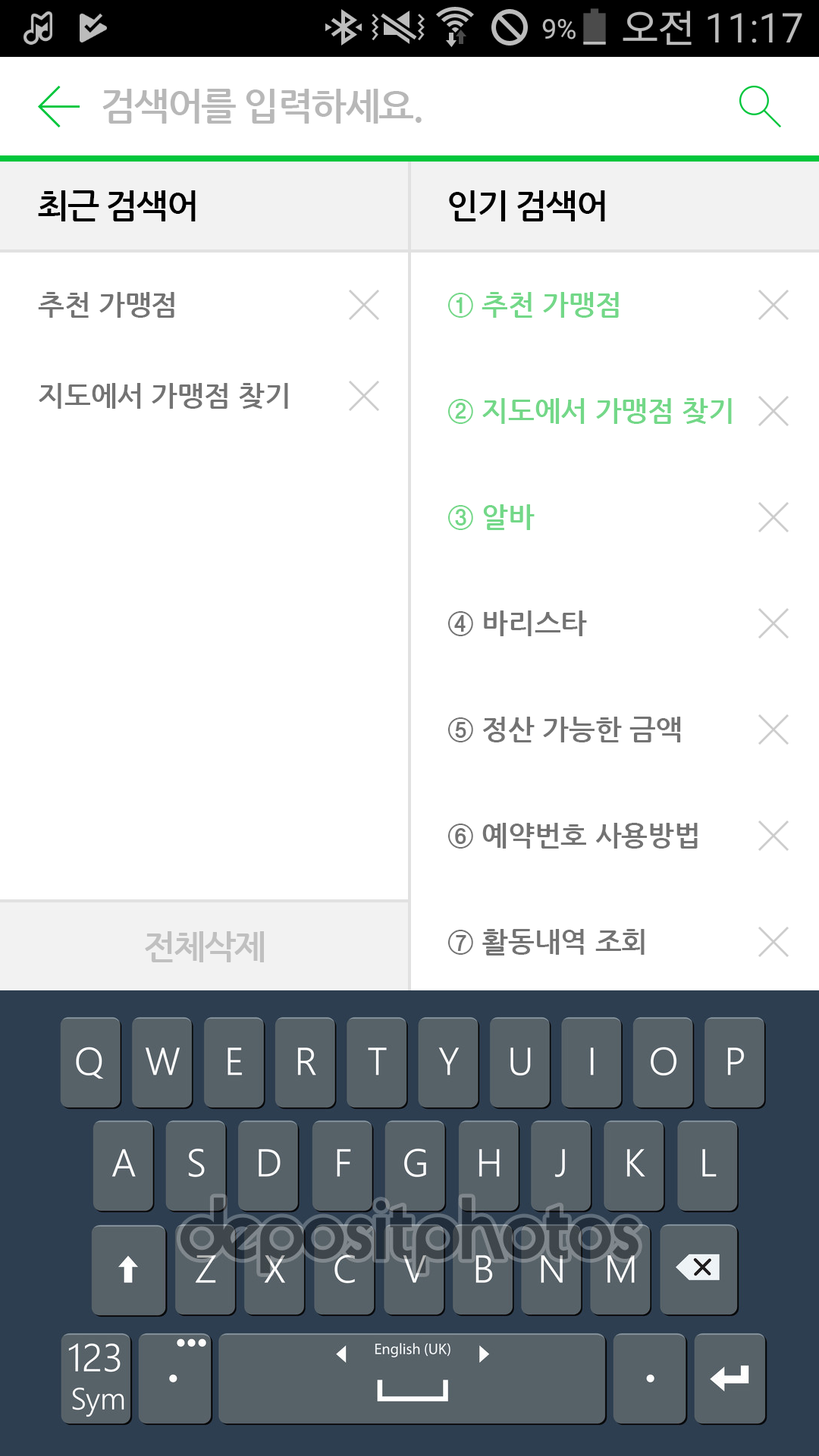
<style>
.page{position:relative;width:819px;height:1456px;background:#ffffff}
.page>*{position:absolute;margin:0}
.t1{font:37.9px "NanumGothicBold";letter-spacing:-0.05em;color:#b8b8b8}
.t2{font:34.1px "NanumGothicBold";letter-spacing:-0.05em;color:#000000}
.t3{font:28.1px/37.9px "NanumGothicBold";color:#737373}
.t4{font:28.1px/53.1px "NanumGothicBold"}
.t5{font:34.1px "NanumGothicBold";letter-spacing:-0.05em;color:#c0c0c0}
</style>
<div class="page">
<p class="t1" style="left:102px;top:89px;width:320px;height:35px">검색어를 입력하세요.</p>
<p class="t2" style="left:38px;top:190px;width:158px;height:31px">최근 검색어</p>
<p class="t2" style="left:449px;top:190px;width:156px;height:31px">인기 검색어</p>
<p class="t3" style="left:38px;top:292px;width:250px;height:117px">추천 가맹점<br><br>지도에서 가맹점 찾기</p>
<p class="t4" style="left:448px;top:292px;width:284px;height:663px">① 추천 가맹점<br><br>② 지도에서 가맹점 찾기<br><br>③ 알바<br><br>④ 바리스타<br><br>⑤ 정산 가능한 금액<br><br>⑥ 예약번호 사용방법<br><br>⑦ 활동내역 조회</p>
<p class="t5" style="left:145px;top:931px;width:119px;height:31px">전체삭제</p>
</div>
